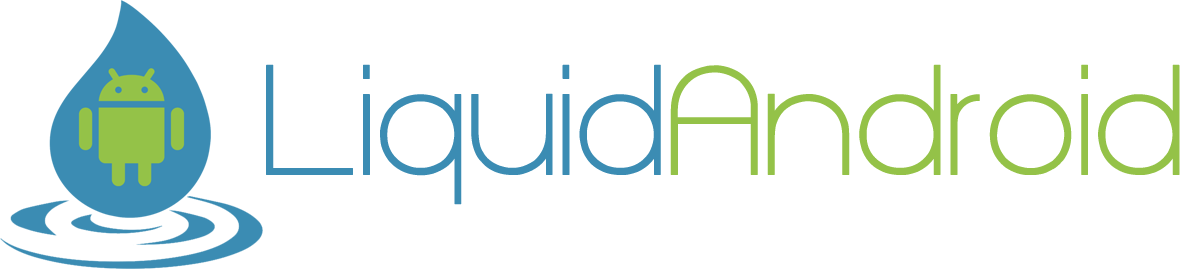
<style>
.page{position:relative;width:1180px;height:269px;background:#ffffff}
.page>*{position:absolute;margin:0}
.t1{font:130px "Steiner";color:#94c248;font-weight:bold}
.t2{font:130px "Steiner";color:#3b8cb3;font-weight:bold}
</style>
<div class="page">
<p class="t1" style="left:266px;top:64px;width:914px;height:141px"><span class="t2">Liquid</span>Android</p>
</div>
